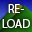
<style>
.page{position:relative;width:32px;height:32px}
.page>*{position:absolute;margin:0}
.t1{font:12px "MyriadPro-Regular";color:#ffffff}
</style>
<div class="page">
<p class="t1" style="left:2px;top:4px;width:28px;height:24px;text-align:center">RE-<br>LOAD</p>
</div>
